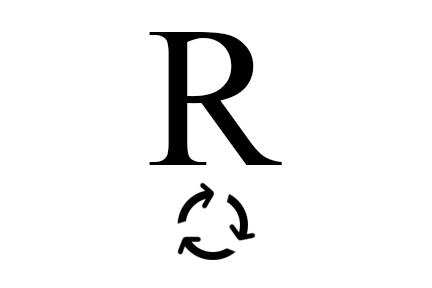
<style>
.page{position:relative;width:432px;height:288px;background:#ffffff}
.page>*{position:absolute;margin:0}
.t1{font:199.6px "TimesNewRomanPSMT";color:#000000}
</style>
<div class="page">
<p class="t1" style="left:149px;top:32px;width:133px;height:133px">R</p>
</div>
